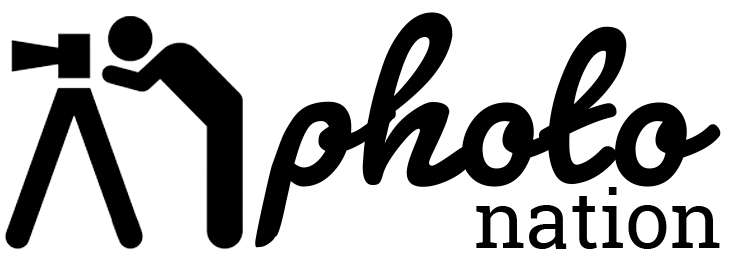
<style>
.page{position:relative;width:730px;height:278px;background:#ffffff}
.page>*{position:absolute;margin:0}
.t1{font:250px "Pacifico-Bold";color:#000000}
.t2{font:80px "RobotoSlab-Regular";color:#000000}
</style>
<div class="page">
<p class="t1" style="left:255px;top:12px;width:466px;height:236px">photo</p>
<p class="t2" style="left:476px;top:187px;width:244px;height:62px">nation</p>
</div>
